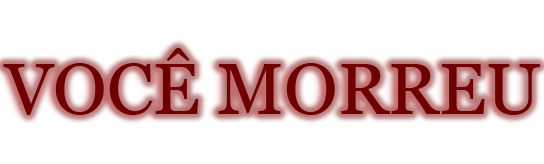
<style>
.page{position:relative;width:544px;height:164px;background:#ffffff}
.page>*{position:absolute;margin:0}
.t1{font:72px "Georgia";color:#6c0000}
</style>
<div class="page">
<p class="t1" style="left:3px;top:48px;width:537px;height:67px">VOCÊ MORREU</p>
</div>
